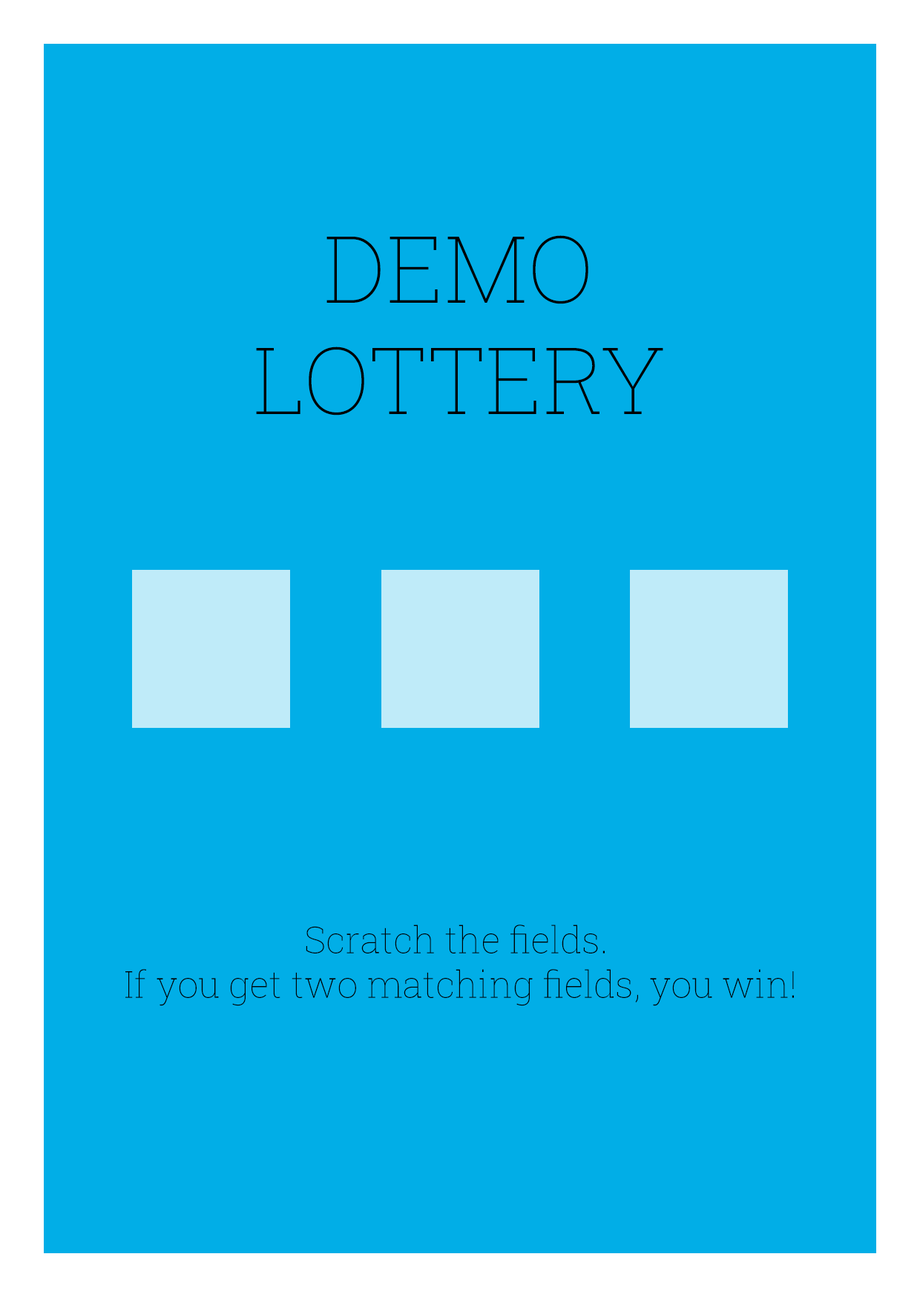
<style>
.page{position:relative;width:920px;height:1297px;background:#01aee7}
.page>*{position:absolute;margin:0}
.t1{font:92.7px "RobotoSlab-Thin";color:#000000}
.t2{font:37.1px "RobotoSlab-Thin";color:#000000}
</style>
<div class="page">
<p class="t1" style="left:256px;top:235px;width:407px;height:180px;text-align:center">DEMO<br>LOTTERY</p>
<p class="t2" style="left:125px;top:924px;width:669px;height:82px;text-align:center">Scratch the fields. <br>If you get two matching fields, you win!</p>
</div>
